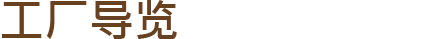
<style>
.page{position:relative;width:422px;height:39px;background:#ffffff}
.page>*{position:absolute;margin:0}
.t1{font:45px "MicrosoftJhengHeiBold";color:#684121}
</style>
<div class="page">
<p class="t1" style="left:2px;top:0px;width:175px;height:39px">工厂导览</p>
</div>
